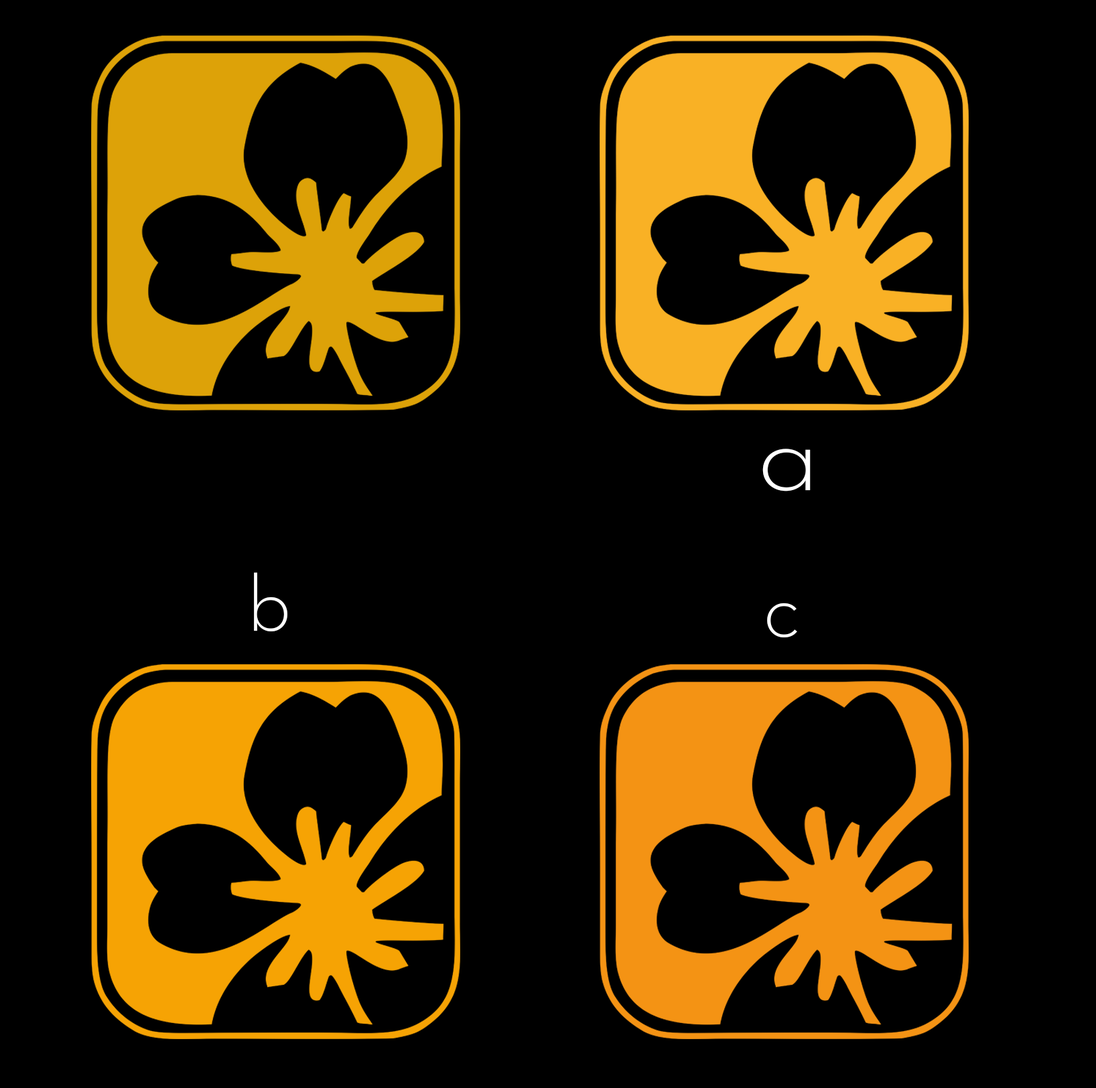
<style>
.page{position:relative;width:1096px;height:1088px;background:#000000}
.page>*{position:absolute;margin:0}
.t1{font:98.7px "NeutraText-LightAlt";letter-spacing:0.17em;color:#ffffff;scale:1.16 1}
.t2{font:80.4px "NeutraText-LightAlt";letter-spacing:0.17em;color:#ffffff}
</style>
<div class="page">
<p class="t1" style="left:762px;top:449px;width:48px;height:43px">a</p>
<p class="t2" style="left:254px;top:573px;width:33px;height:59px">b</p>
<p class="t2" style="left:767px;top:603px;width:30px;height:35px">c</p>
</div>
